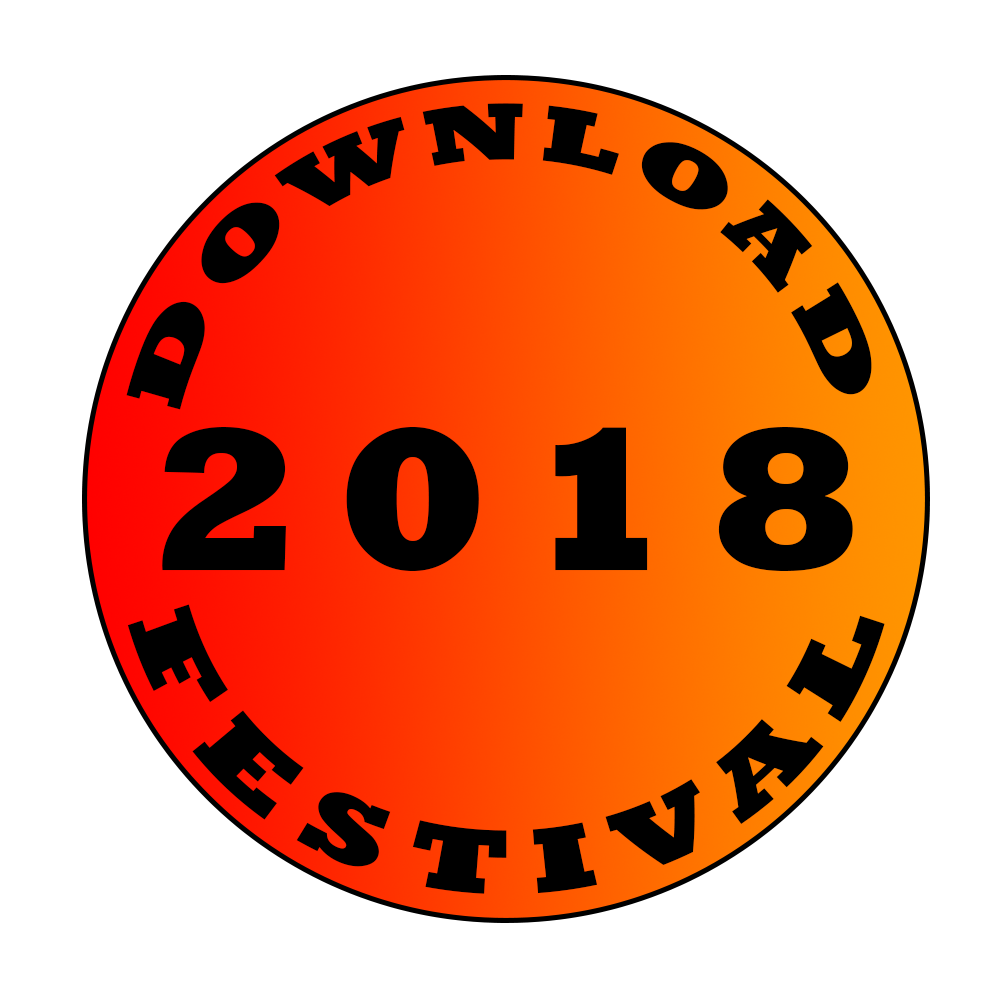
<style>
.page{position:relative;width:1000px;height:1000px;background:#ffffff}
.page>*{position:absolute;margin:0}
.t1{font:81.2px/249.6px "Rockwell-ExtraBold";letter-spacing:0.14em;color:#000000;scale:0.87 1}
.t2{font:206px "Rockwell-ExtraBold";letter-spacing:0.14em;color:#000000;scale:1.09 1}
.t3{font:93.7px/288px "Rockwell-ExtraBold";letter-spacing:0.14em;color:#000000;scale:0.87 1}
</style>
<div class="page">
<p class="t1" style="left:126px;top:103px;width:746px;height:307px;text-align:center">DOWNLOAD</p>
<p class="t2" style="left:162px;top:427px;width:691px;height:144px">2018</p>
<p class="t3" style="left:127px;top:604px;width:758px;height:290px;text-align:center">FESTIVAL</p>
</div>
